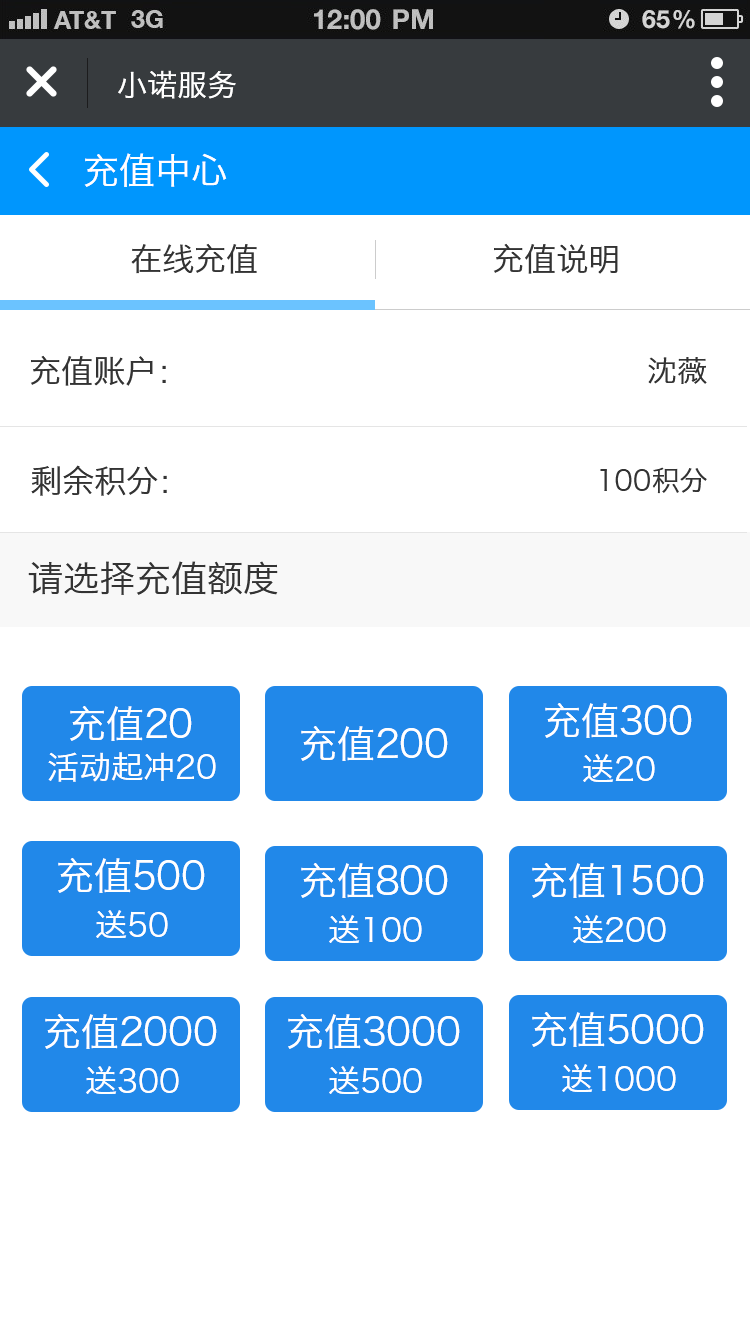
<style>
.page{position:relative;width:750px;height:1334px;background:#ffffff}
.page>*{position:absolute;margin:0}
.t1{font:30px "HiraginoSansGB-W3";color:#ffffff}
.t2{font:36px "HiraginoSansGB-W3";color:#ffffff}
.t3{font:32px "HiraginoSansGB-W3";color:#333333}
.t4{font:30px "HiraginoSansGB-W3";color:#333333}
.t5{font:28px "HiraginoSansGB-W3";color:#333333}
.t6{font:36px "HiraginoSansGB-W3";color:#333333}
.t7{font:38px "HiraginoSansGB-W3";color:#ffffff}
.t8{font:32px "HiraginoSansGB-W3";color:#ffffff}
</style>
<div class="page">
<p class="t1" style="left:118px;top:70px;width:118px;height:29px">小诺服务</p>
<p class="t2" style="left:84px;top:153px;width:143px;height:34px">充值中心</p>
<p class="t3" style="left:131px;top:243px;width:487px;height:31px">在线充值                      充值说明</p>
<p class="t3" style="left:30px;top:355px;width:136px;height:31px">充值账户：</p>
<p class="t4" style="left:648px;top:357px;width:59px;height:27px">沈薇</p>
<p class="t3" style="left:31px;top:465px;width:136px;height:31px">剩余积分：</p>
<p class="t5" style="left:600px;top:467px;width:107px;height:27px">100积分</p>
<p class="t6" style="left:28px;top:561px;width:250px;height:34px">请选择充值额度</p>
<p class="t7" style="left:70px;top:706px;width:122px;height:35px">充值20</p>
<p class="t7" style="left:545px;top:703px;width:147px;height:35px">充值300</p>
<p class="t7" style="left:301px;top:726px;width:147px;height:35px">充值200</p>
<p class="t8" style="left:48px;top:752px;width:168px;height:30px">活动起冲20</p>
<p class="t8" style="left:583px;top:754px;width:72px;height:28px">送20</p>
<p class="t7" style="left:58px;top:858px;width:147px;height:35px">充值500</p>
<p class="t7" style="left:301px;top:863px;width:147px;height:35px">充值800</p>
<p class="t7" style="left:532px;top:863px;width:172px;height:35px">充值1500</p>
<p class="t8" style="left:96px;top:910px;width:72px;height:28px">送50</p>
<p class="t8" style="left:329px;top:915px;width:93px;height:28px">送100</p>
<p class="t8" style="left:573px;top:915px;width:93px;height:28px">送200</p>
<p class="t7" style="left:45px;top:1014px;width:172px;height:35px">充值2000</p>
<p class="t7" style="left:288px;top:1014px;width:172px;height:35px">充值3000</p>
<p class="t7" style="left:532px;top:1012px;width:172px;height:35px">充值5000</p>
<p class="t8" style="left:86px;top:1066px;width:93px;height:28px">送300</p>
<p class="t8" style="left:329px;top:1066px;width:93px;height:28px">送500</p>
<p class="t8" style="left:562px;top:1064px;width:114px;height:28px">送1000</p>
</div>
